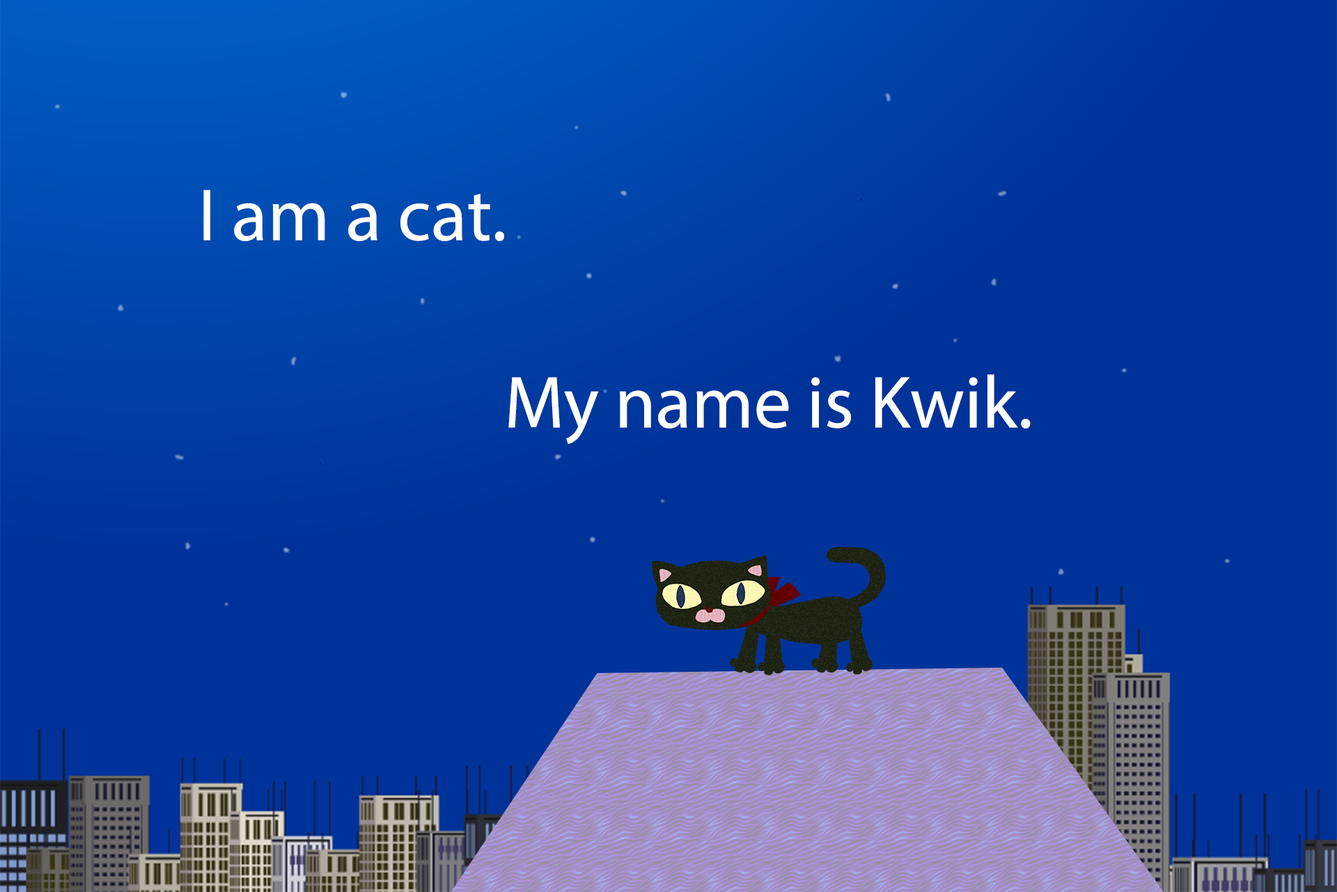
<style>
.page{position:relative;width:1337px;height:892px;background:#003399}
.page>*{position:absolute;margin:0}
.t1{font:74.2px "MyriadPro-Regular";color:#ffffff}
</style>
<div class="page">
<p class="t1" style="left:203px;top:189px;width:301px;height:52px">I am a cat.</p>
<p class="t1" style="left:508px;top:374px;width:523px;height:70px">My name is Kwik.</p>
</div>
